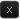
<style>
.page{position:relative;width:20px;height:20px}
.page>*{position:absolute;margin:0}
.t1{font:11px "Tahoma";color:#ababab}
</style>
<div class="page">
<p class="t1" style="left:7px;top:7px;width:5px;height:6px">x</p>
</div>
